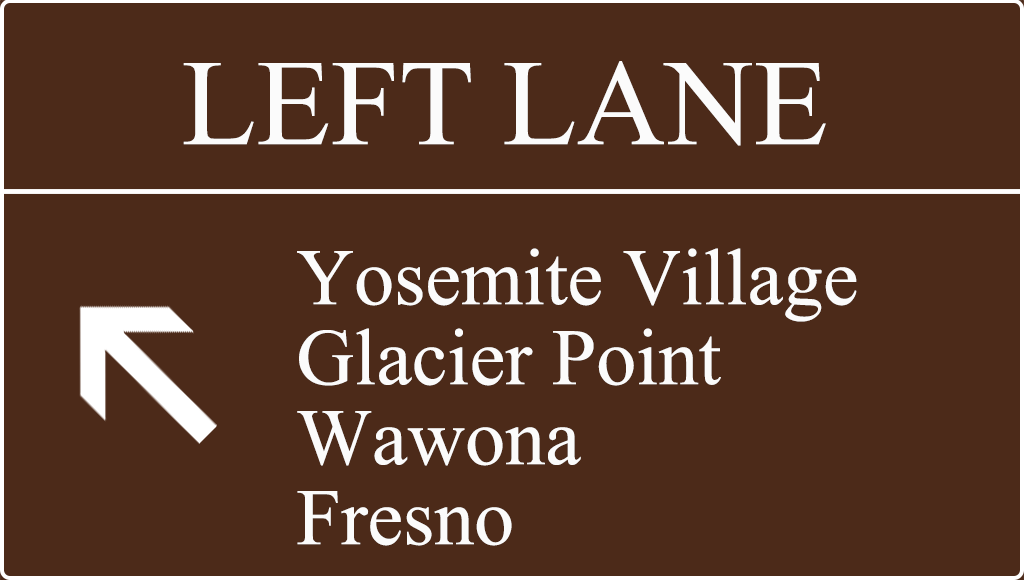
<style>
.page{position:relative;width:1024px;height:580px;background:#4c2a19}
.page>*{position:absolute;margin:0}
.t1{font:122.4px "IskoolaPota";color:#fbfbfb}
.t2{font:80px/80px "IskoolaPota";color:#fbfbfb}
</style>
<div class="page">
<p class="t1" style="left:183px;top:61px;width:643px;height:85px">LEFT LANE</p>
<p class="t2" style="left:297px;top:248px;width:560px;height:298px">Yosemite Village<br>Glacier Point<br>Wawona<br>Fresno</p>
</div>
